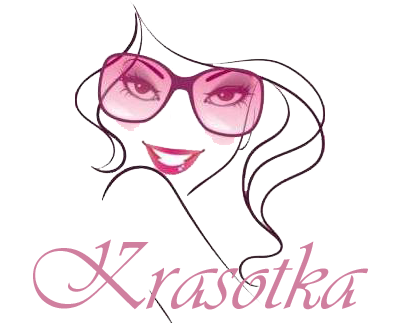
<style>
.page{position:relative;width:400px;height:323px;background:#ffffff}
.page>*{position:absolute;margin:0}
.t1{font:100px "Vivaldii";color:#d07f9f}
</style>
<div class="page">
<p class="t1" style="left:33px;top:239px;width:335px;height:71px">Krasotka</p>
</div>
